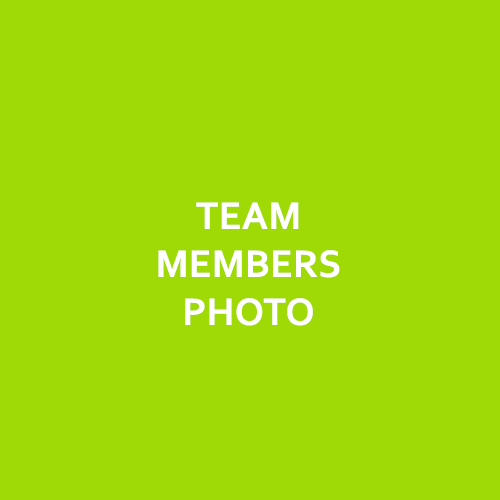
<style>
.page{position:relative;width:500px;height:500px;background:#9fda06}
.page>*{position:absolute;margin:0}
.t1{font:40px "Corbel-Bold";letter-spacing:0.005em;color:#ffffff}
</style>
<div class="page">
<p class="t1" style="left:158px;top:202px;width:182px;height:124px;text-align:center">TEAM<br>MEMBERS <br>PHOTO</p>
</div>
